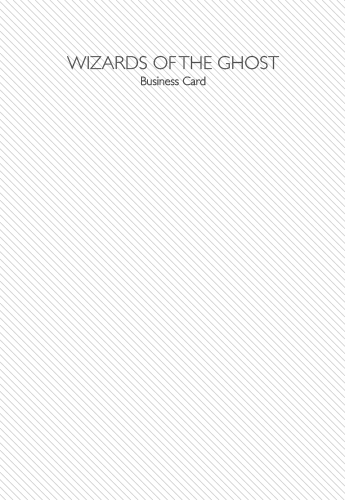
<style>
.page{position:relative;width:345px;height:500px;background:#ffffff}
.page>*{position:absolute;margin:0}
.t1{font:18.6px/19px "GillSans-Light";color:#4e4e4e;text-transform:uppercase}
.t2{font:12px/16.3px "GillSans-Light";color:#4e4e4e}
</style>
<div class="page">
<p class="t1" style="left:67px;top:55px;width:213px;height:31px;text-align:center">Wizards of the ghost<br><span class="t2">Business Card</span></p>
</div>
